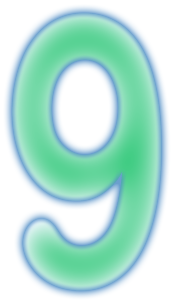
<style>
.page{position:relative;width:172px;height:304px;background:#ffffff}
.page>*{position:absolute;margin:0}
.t1{font:390px "AGBuchRoundedCondensedBQ-BoldOutline";scale:0.77 1}
</style>
<div class="page">
<p class="t1" style="left:12px;top:13px;width:150px;height:278px">9</p>
</div>
